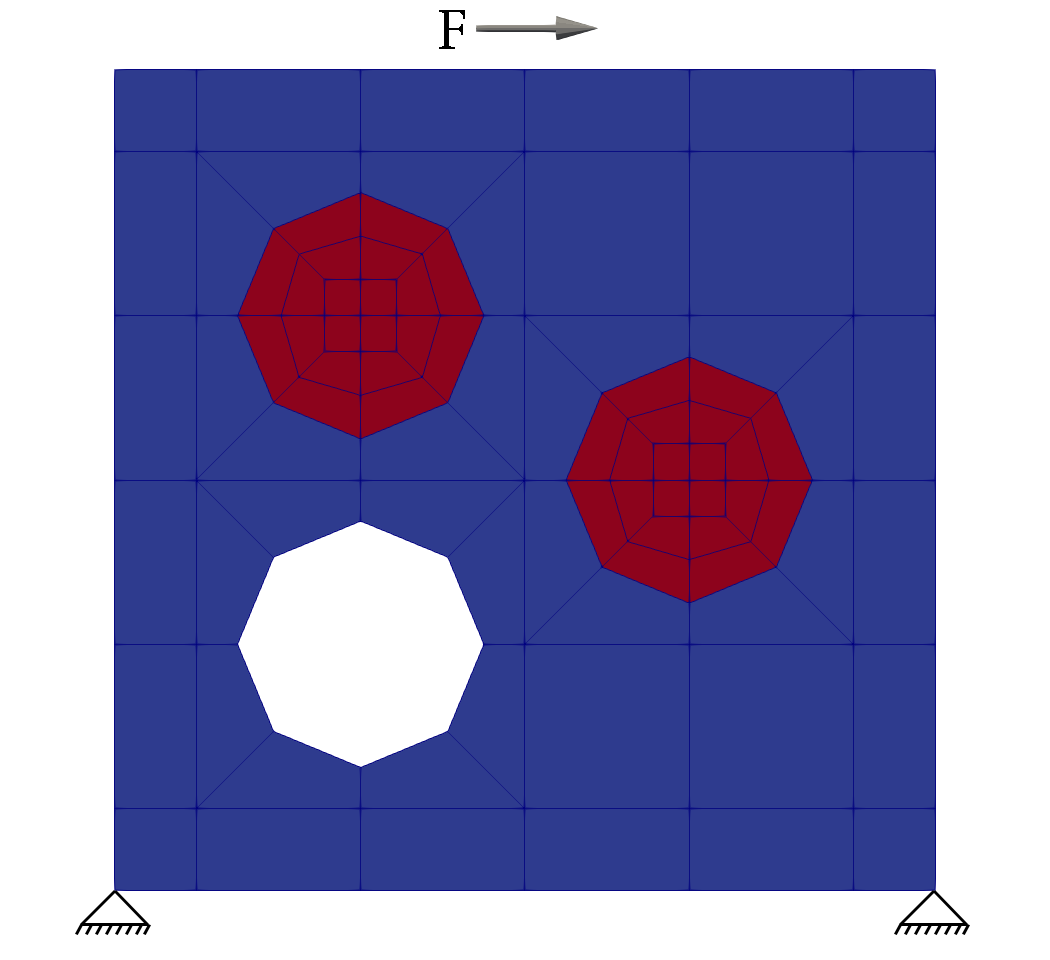
<style>
.page{position:relative;width:1050px;height:960px;background:#2e3b8e}
.page>*{position:absolute;margin:0}
.t1{font:60px "MinionPro-Regular";color:#000000}
</style>
<div class="page">
<p class="t1" style="left:439px;top:10px;width:26px;height:39px">F</p>
</div>
